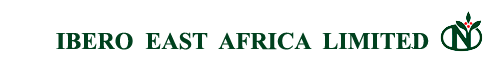
<style>
.page{position:relative;width:500px;height:60px;background:#ffffff}
.page>*{position:absolute;margin:0}
.t1{font:24px "TimesNewRomanPS-BoldMT";color:#00411e}
</style>
<div class="page">
<p class="t1" style="left:56px;top:32px;width:373px;height:18px">IBERO  EAST  AFRICA  LIMITED</p>
</div>
